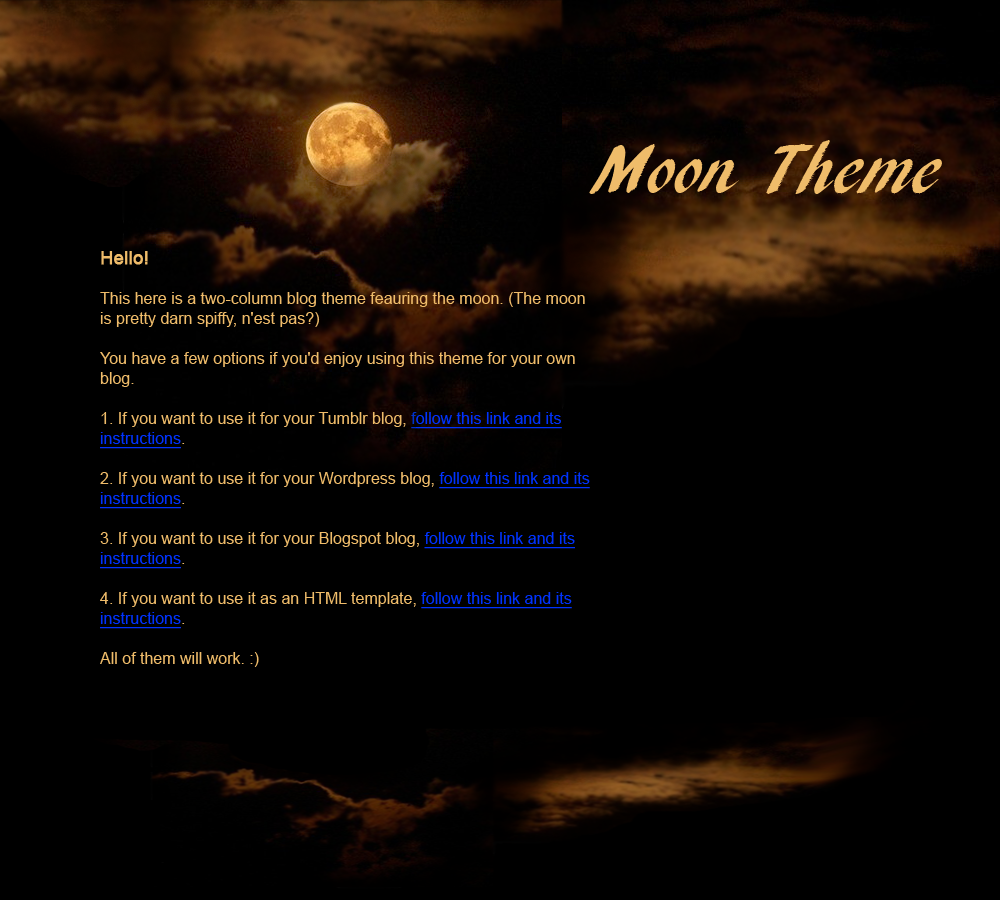
<style>
.page{position:relative;width:1000px;height:900px;background:#000000}
.page>*{position:absolute;margin:0}
.t1{font:72px "ARBLANCA";color:#efbc6a}
.t2{font:16px/20px "ArialMT";color:#efbc6a}
.t3{font:18px/22px "ArialMT";color:#efbc6a;font-weight:bold}
.t4{font:16px/20px "ArialMT";color:#0033cc;text-decoration:underline}
.t5{font:16px/20px "ArialMT";color:#0033ff;text-decoration:underline}
</style>
<div class="page">
<p class="t1" style="left:589px;top:140px;width:353px;height:54px">Moon Theme</p>
<p class="t2" style="left:100px;top:251px;width:490px;height:416px"><span class="t3">Hello!<br></span>This here is a two-column blog theme feauring the moon. (The moon is pretty darn spiffy, n'est pas?)<br>You have a few options if you'd enjoy using this theme for your own blog.<br>1. If you want to use it for your Tumblr blog, <span class="t4">f</span><span class="t5">ollow this link and its instructions</span>.<br>2. If you want to use it for your Wordpress blog, <span class="t5">follow this link and its instructions</span>.<br>3. If you want to use it for your Blogspot blog, <span class="t5">follow this link and its instructions</span>.<br>4. If you want to use it as an HTML template, <span class="t5">follow this link and its instructions</span>.<br>All of them will work. :)<br>This theme is being released under a [license type], which means [rules].</p>
</div>
